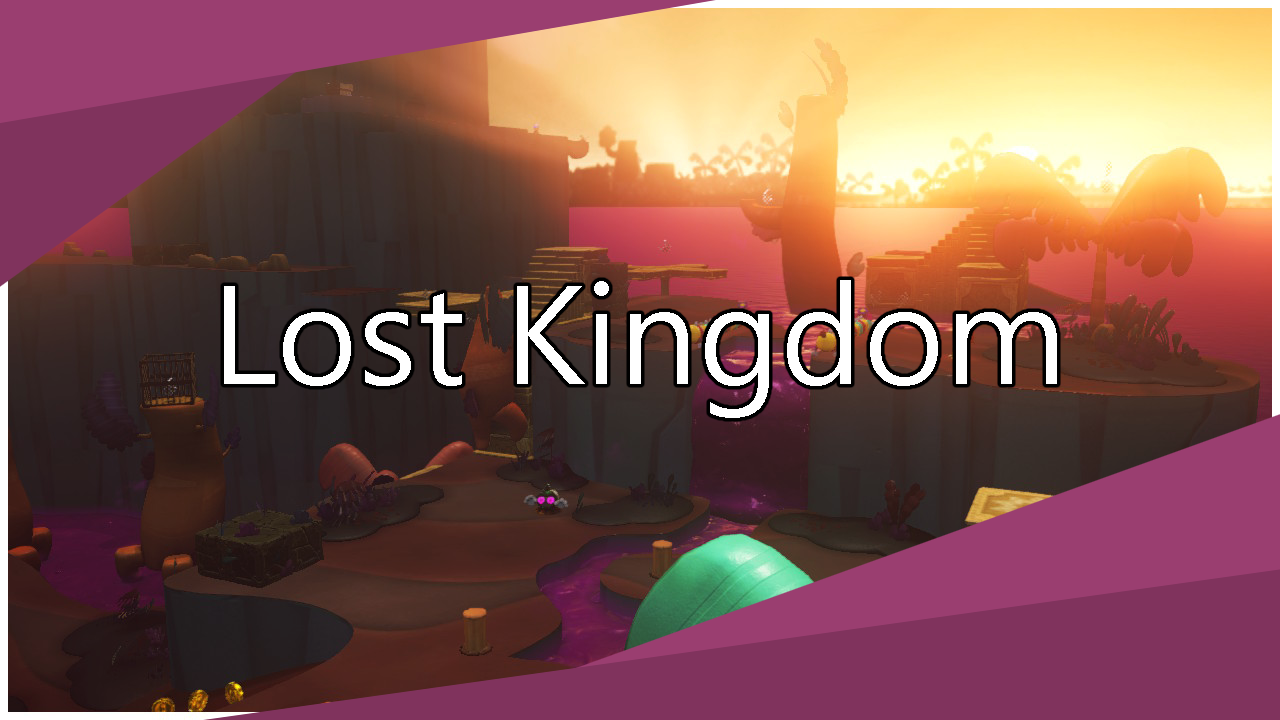
<style>
.page{position:relative;width:1280px;height:720px}
.page>*{position:absolute;margin:0}
.t1{font:140px "SegoeUI";color:#ffffff}
</style>
<div class="page">
<p class="t1" style="left:224px;top:280px;width:833px;height:138px">Lost Kingdom</p>
</div>
